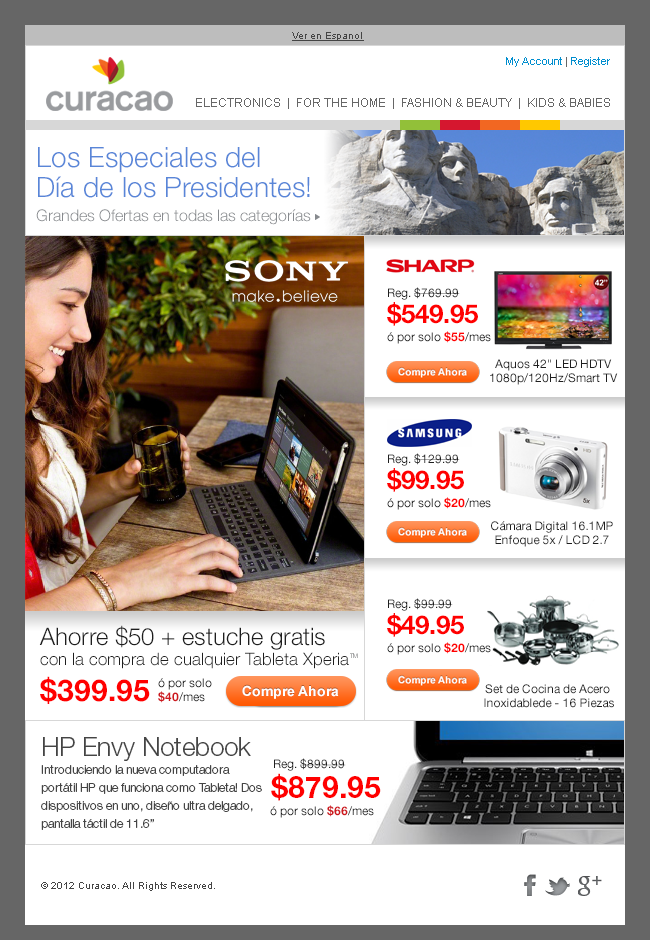
<style>
.page{position:relative;width:650px;height:940px;background:#ffffff}
.page>*{position:absolute;margin:0}
.t1{font:10px "ArialMT";color:#444444;text-decoration:underline}
.t2{font:11px "ArialMT";color:#008ecf}
.t3{font:11px "ArialMT";color:#666666}
.t4{font:12px "ArialMT";color:#666666}
.t5{font:16px/24px "HelveticaNeue-Light";color:#878a8e}
.t6{font:28px/24px "HelveticaNeue-Light";color:#5986d8}
.t7{font:28px/30px "HelveticaNeue-Light";color:#5986d8}
.t8{font:12px/18px "HelveticaNeue-Roman";color:#1e1e1e}
.t9{font:26px/26px "HelveticaNeue-Bold";color:#ff0000}
.t10{font:12px/18px "HelveticaNeue-Bold";color:#ff0000}
.t11{font:12px/14px "HelveticaNeue-Roman";color:#1e1e1e}
.t12{font:17px/20px "HelveticaNeue-Light";color:#1e1e1e}
.t13{font:24px/18px "HelveticaNeue-Light";color:#1e1e1e}
.t14{font:30px/36px "HelveticaNeue-Bold";color:#ff0000}
.t15{font:6px "HelveticaNeue-Light"}
.t16{font:12px/18px "HelveticaNeue-Roman";color:#ce181e}
.t17{font:12px/14px "HelveticaNeue-Bold";color:#ce181e}
.t18{font:12px/14px "HelveticaNeue-Roman";color:#ce181e}
.t19{font:12px/18px "HelveticaNeue-Light";color:#444444}
.t20{font:26px/30px "HelveticaNeue-Light";color:#444444}
.t21{font:12px "HelveticaNeue-Roman";color:#1e1e1e}
.t22{font:30px "HelveticaNeue-Bold";color:#ff0000}
.t23{font:12px "HelveticaNeue-Roman";color:#ce181e}
.t24{font:12px "HelveticaNeue-Bold";color:#ce181e}
.t25{font:10px "ArialMT";color:#444444}
</style>
<div class="page">
<p class="t1" style="left:292px;top:32px;width:72px;height:9px">Ver en Espanol</p>
<p class="t2" style="left:506px;top:57px;width:104px;height:10px">My Account<span class="t3"> | </span>Register</p>
<p class="t4" style="left:196px;top:98px;width:414px;height:11px">ELECTRONICS  |  FOR THE HOME  |  FASHION &amp; BEAUTY  |  KIDS &amp; BABIES</p>
<p class="t5" style="left:36px;top:147px;width:275px;height:78px"><span class="t6">Los Especiales del <br></span><span class="t7">Día de los Presidentes!<br></span>Grandes Ofertas en todas las categorías</p>
<p class="t8" style="left:387px;top:287px;width:104px;height:57px">Reg. $769.99<br><span class="t9">$549.95<br></span>ó por solo <span class="t10">$55</span>/mes</p>
<p class="t11" style="left:490px;top:359px;width:128px;height:26px;text-align:center">Aquos 42" LED HDTV<br>1080p/120Hz/Smart TV</p>
<p class="t8" style="left:387px;top:453px;width:104px;height:57px">Reg. $129.99<br><span class="t9">$99.95<br></span>ó por solo <span class="t10">$20</span>/mes</p>
<p class="t11" style="left:491px;top:521px;width:122px;height:26px;text-align:center">Cámara Digital 16.1MP<br>Enfoque 5x / LCD 2.7</p>
<p class="t8" style="left:387px;top:598px;width:104px;height:57px">Reg. $99.99<br><span class="t9">$49.95<br></span>ó por solo <span class="t10">$20</span>/mes</p>
<p class="t12" style="left:39px;top:625px;width:310px;height:79px"><span class="t13">Ahorre $50 + estuche gratis<br></span>con la compra de cualquier Tableta Xperia<br><span class="t14">$399.95</span></p>
<p class="t15" style="left:350px;top:653px;width:8px;height:5px">TM</p>
<p class="t16" style="left:158px;top:678px;width:54px;height:25px">ó por solo<br><span class="t17">$40</span><span class="t18">/mes</span></p>
<p class="t11" style="left:484px;top:684px;width:130px;height:24px;text-align:center">Set de Cocina de Acero <br>Inoxidablede - 16 Piezas</p>
<p class="t19" style="left:41px;top:737px;width:221px;height:93px"><span class="t20">HP Envy Notebook<br></span>Introduciendo la nueva computadora portátil HP que funciona como Tableta! Dos dispositivos en uno, diseño ultra delgado, pantalla táctil de 11.6”</p>
<p class="t21" style="left:274px;top:758px;width:72px;height:13px">Reg. $899.99</p>
<p class="t22" style="left:271px;top:773px;width:110px;height:28px">$879.95</p>
<p class="t23" style="left:270px;top:805px;width:104px;height:13px">ó por solo <span class="t24">$66</span>/mes</p>
<p class="t25" style="left:41px;top:882px;width:174px;height:9px">© 2012 Curacao. All Rights Reserved.</p>
</div>
